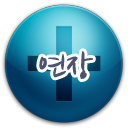
<style>
.page{position:relative;width:128px;height:128px;background:#ffffff}
.page>*{position:absolute;margin:0}
.t1{font:35px "NanumBrush";color:#4b5273;font-weight:bold}
</style>
<div class="page">
<p class="t1" style="left:39px;top:51px;width:54px;height:28px">연장</p>
</div>
